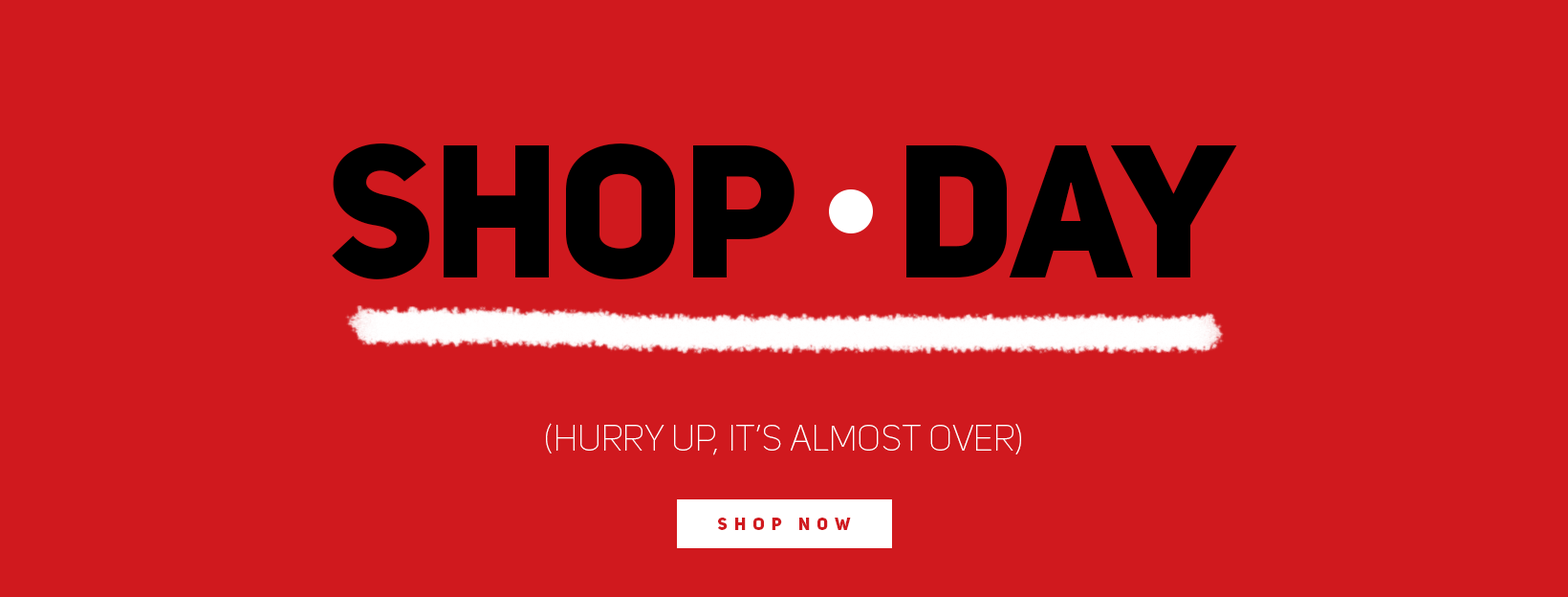
<style>
.page{position:relative;width:1568px;height:597px;background:#d0191e}
.page>*{position:absolute;margin:0}
.t1{font:186.4px "UniSansHeavyCAPS";color:#000000;text-transform:uppercase}
.t2{font:35.4px "UniSansThinCAPS";color:#ffffff;text-transform:uppercase}
.t3{font:17.2px "UniSansHeavyCAPS";letter-spacing:0.4em;color:#d0191e;text-transform:uppercase}
</style>
<div class="page">
<p class="t1" style="left:332px;top:143px;width:905px;height:136px">Shop   day</p>
<p class="t2" style="left:546px;top:423px;width:475px;height:32px">(hurry up, it’s almost over)</p>
<p class="t3" style="left:718px;top:517px;width:133px;height:13px">Shop Now</p>
</div>
